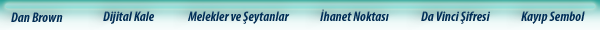
<style>
.page{position:relative;width:600px;height:30px}
.page>*{position:absolute;margin:0}
.t1{font:14px "MyriadPro-BoldCondIt";color:#01305b}
.t2{font:14px "MyriadPro-Regular";color:#01305b}
</style>
<div class="page">
<p class="t1" style="left:11px;top:12px;width:52px;height:10px">Dan Brown</p>
<p class="t1" style="left:103px;top:11px;width:51px;height:13px"><span class="t2"><br></span>Dijital Kale</p>
<p class="t1" style="left:188px;top:11px;width:102px;height:13px">Melekler ve Şeytanlar</p>
<p class="t1" style="left:320px;top:9px;width:69px;height:12px">İhanet Noktası</p>
<p class="t1" style="left:421px;top:11px;width:69px;height:13px">Da Vinci Şifresi</p>
<p class="t1" style="left:521px;top:11px;width:64px;height:13px">Kayıp Sembol</p>
</div>
